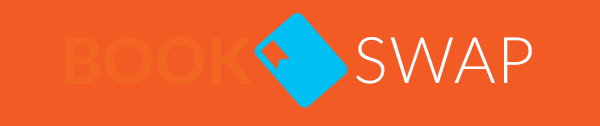
<style>
.page{position:relative;width:600px;height:126px;background:#f25b23}
.page>*{position:absolute;margin:0}
.t1{font:110px "Lato-Heavy";color:#f26522}
.t2{font:110px "Lato-Light";letter-spacing:0.025em;color:#ffffff}
</style>
<div class="page">
<p class="t1" style="left:65px;top:36px;width:187px;height:49px">BOOK</p>
<p class="t2" style="left:356px;top:37px;width:176px;height:47px">SWAP</p>
</div>
